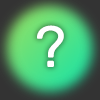
<style>
.page{position:relative;width:100px;height:100px}
.page>*{position:absolute;margin:0}
.t1{font:58.3px "RubikRoman-Regular";color:#ffffff}
</style>
<div class="page">
<p class="t1" style="left:37px;top:25px;width:27px;height:42px">?</p>
</div>
